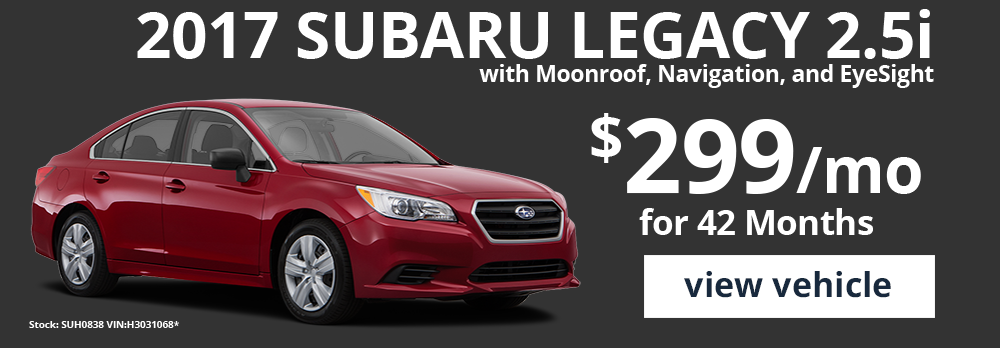
<style>
.page{position:relative;width:1000px;height:348px;background:#333333}
.page>*{position:absolute;margin:0}
.t1{font:39px/0px "OpenSans-Bold";letter-spacing:-0.01em;color:#ffffff}
.t2{font:110px "OpenSans-Bold";letter-spacing:-0.01em;color:#ffffff}
.t3{font:34.6px/42.4px "OpenSans-Bold";letter-spacing:-0.01em;color:#ffffff}
.t4{font:102.8px/42.4px "OpenSans-Bold";letter-spacing:-0.01em;color:#ffffff}
.t5{font:63.8px/42.4px "OpenSans-Bold";letter-spacing:-0.01em;color:#ffffff}
.t6{font:34.2px "OpenSans-Bold";color:#18293d}
.t7{font:10px "OpenSans-Bold";letter-spacing:-0.01em;color:#ffffff}
</style>
<div class="page">
<p class="t1" style="left:137px;top:9px;width:797px;height:79px;text-align:right"><span class="t2">2017 SUBARU LEGACY 2.5i<br></span>with Moonroof, Navigation, and EyeSight</p>
<p class="t3" style="left:591px;top:113px;width:330px;height:122px;text-align:center"><span class="t4">$299</span><span class="t5">/mo<br></span>for 42 Months</p>
<p class="t6" style="left:684px;top:271px;width:207px;height:27px">view vehicle</p>
<p class="t7" style="left:29px;top:321px;width:150px;height:7px">Stock: SUH0838 VIN:H3031068*</p>
</div>
